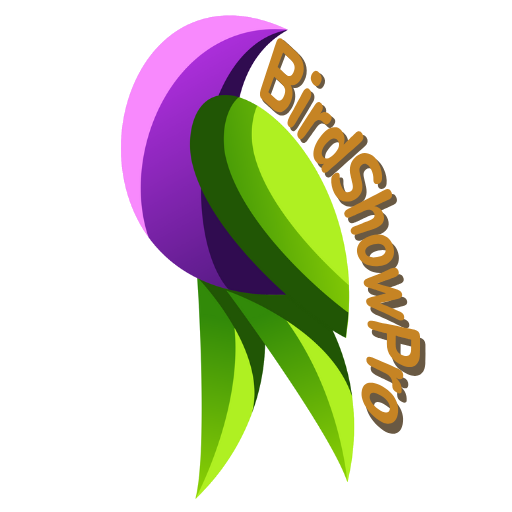
<style>
.page{position:relative;width:512px;height:512px;background:#ffffff}
.page>*{position:absolute;margin:0}
.t1{font:59.6px "Nunito-ExtraBold";color:#c68424}
.t2{font:60.8px "Nunito-ExtraBold"}
</style>
<div class="page">
<p class="t1" style="left:260px;top:38px;width:161px;height:386px;rotate:72deg">BirdShowPro</p>
<p class="t2" style="left:261px;top:38px;width:165px;height:397px;rotate:72deg">BirdShowPro</p>
</div>
